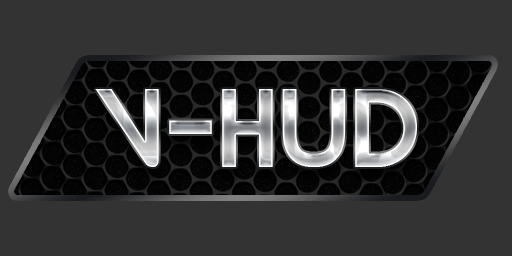
<style>
.page{position:relative;width:512px;height:256px;background:#333333}
.page>*{position:absolute;margin:0}
.t1{font:100px "Strasua-Regular";letter-spacing:0.02em}
</style>
<div class="page">
<p class="t1" style="left:95px;top:89px;width:322px;height:78px">V-HUD</p>
</div>
